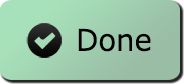
<style>
.page{position:relative;width:184px;height:84px}
.page>*{position:absolute;margin:0}
.t1{font:30px "Verdana";color:#000000;scale:0.97 1}
</style>
<div class="page">
<p class="t1" style="left:78px;top:28px;width:73px;height:24px">Done</p>
</div>
